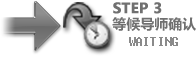
<style>
.page{position:relative;width:196px;height:57px;background:#ffffff}
.page>*{position:absolute;margin:0}
.t1{font:14px/16px "MicrosoftYaHei-Bold";color:#707070;font-weight:bold}
.t2{font:14px/16px "MicrosoftYaHei-Bold";color:#707070}
.t3{font:14px "Fixedsys";letter-spacing:-0.06em;color:#8a8a8a}
</style>
<div class="page">
<p class="t1" style="left:112px;top:2px;width:84px;height:29px">STEP 3<br><span class="t2"> 等候导师确认</span></p>
<p class="t3" style="left:129px;top:37px;width:49px;height:9px">WAITING</p>
</div>
